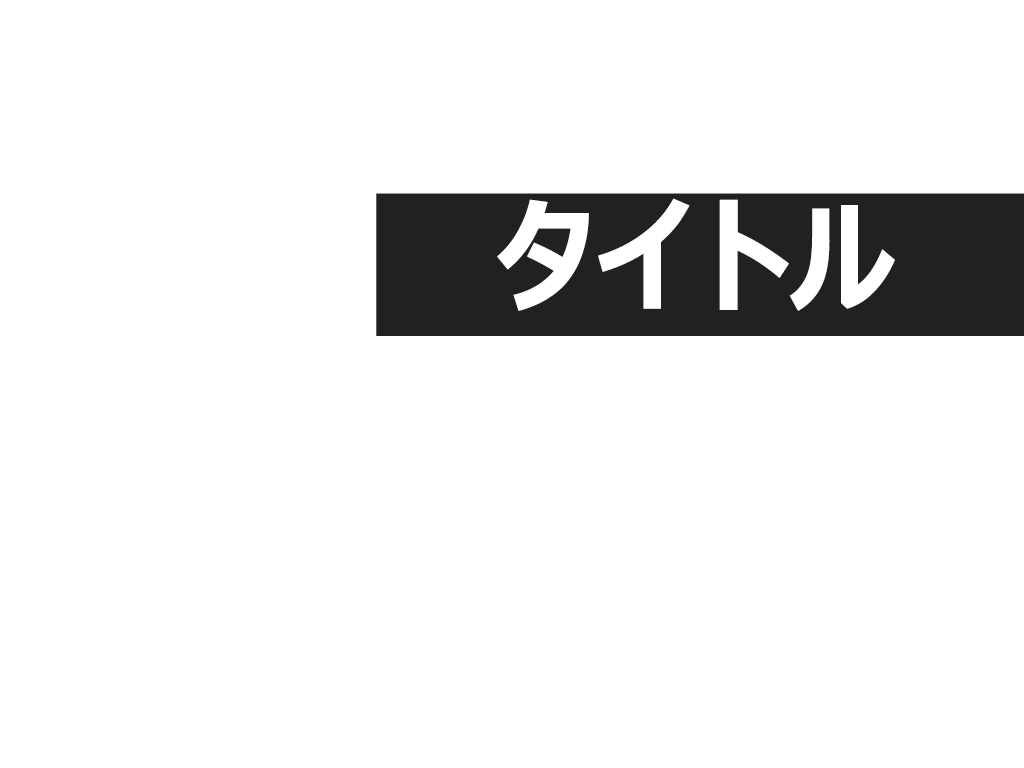
<style>
.page{position:relative;width:1024px;height:768px;background:#ffffff}
.page>*{position:absolute;margin:0}
.t1{font:125px "MeiryoUI-Bold";color:#ffffff}
</style>
<div class="page">
<p class="t1" style="left:497px;top:198px;width:398px;height:113px">タイトル</p>
</div>
